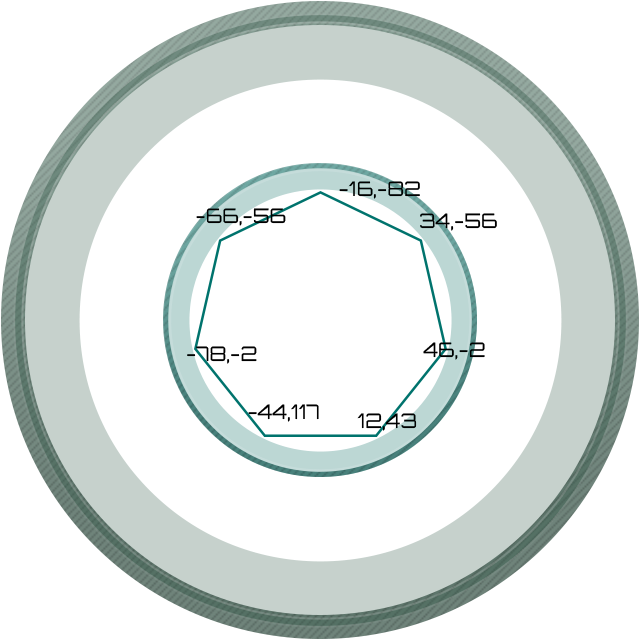
<style>
.page{position:relative;width:640px;height:640px;background:#ffffff}
.page>*{position:absolute;margin:0}
.t1{font:20px "Orbitron-Regular";color:#000000}
</style>
<div class="page">
<p class="t1" style="left:339px;top:181px;width:81px;height:18px">-16,-82</p>
<p class="t1" style="left:196px;top:208px;width:90px;height:18px">-66,-56</p>
<p class="t1" style="left:420px;top:213px;width:77px;height:18px">34,-56</p>
<p class="t1" style="left:423px;top:342px;width:62px;height:18px">46,-2</p>
<p class="t1" style="left:187px;top:346px;width:70px;height:18px">-78,-2</p>
<p class="t1" style="left:248px;top:404px;width:71px;height:18px">-44,117</p>
<p class="t1" style="left:357px;top:413px;width:60px;height:18px">12,43</p>
</div>
